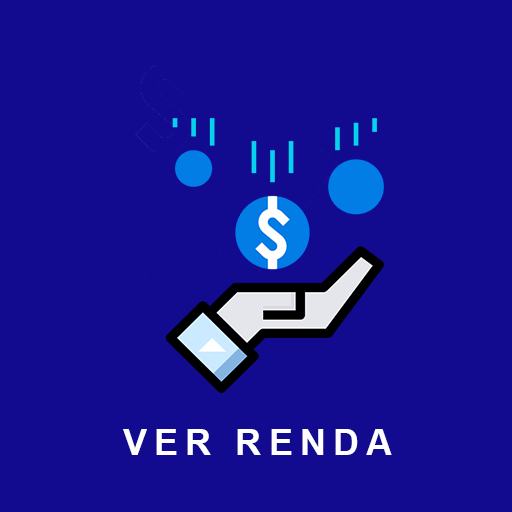
<style>
.page{position:relative;width:512px;height:512px;background:#120a8f}
.page>*{position:absolute;margin:0}
.t1{font:36px "Arial-BoldMT";letter-spacing:0.2em;color:#ffffff;text-transform:uppercase}
</style>
<div class="page">
<p class="t1" style="left:123px;top:429px;width:269px;height:26px">VER RENDA</p>
</div>
